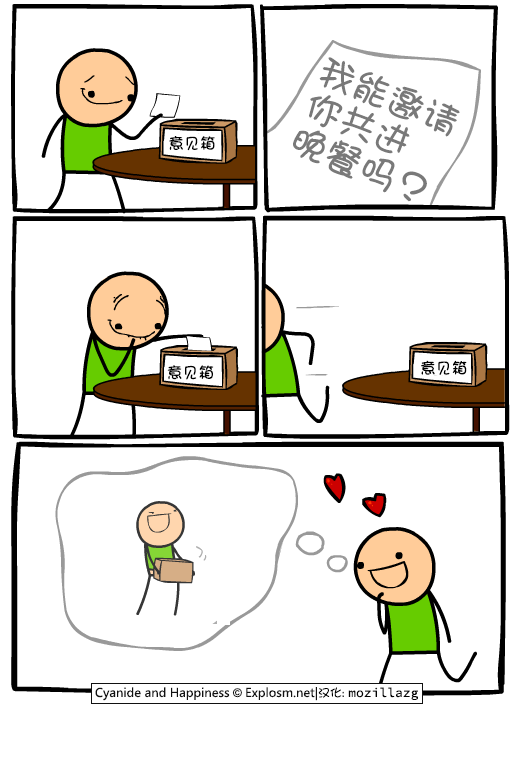
<style>
.page{position:relative;width:520px;height:770px;background:#ffffff}
.page>*{position:absolute;margin:0}
.t1{font:37px/37px "DFGirl";color:#797979}
.t2{font:16px "DFGirl";color:#000000}
</style>
<div class="page">
<p class="t1" style="left:293px;top:57px;width:167px;height:145px;rotate:22deg">我能邀请<br>你共进<br>晚餐吗？</p>
<p class="t2" style="left:169px;top:136px;width:46px;height:15px">意见箱</p>
<p class="t2" style="left:167px;top:365px;width:47px;height:15px">意见箱</p>
<p class="t2" style="left:421px;top:360px;width:46px;height:15px">意见箱</p>
</div>
